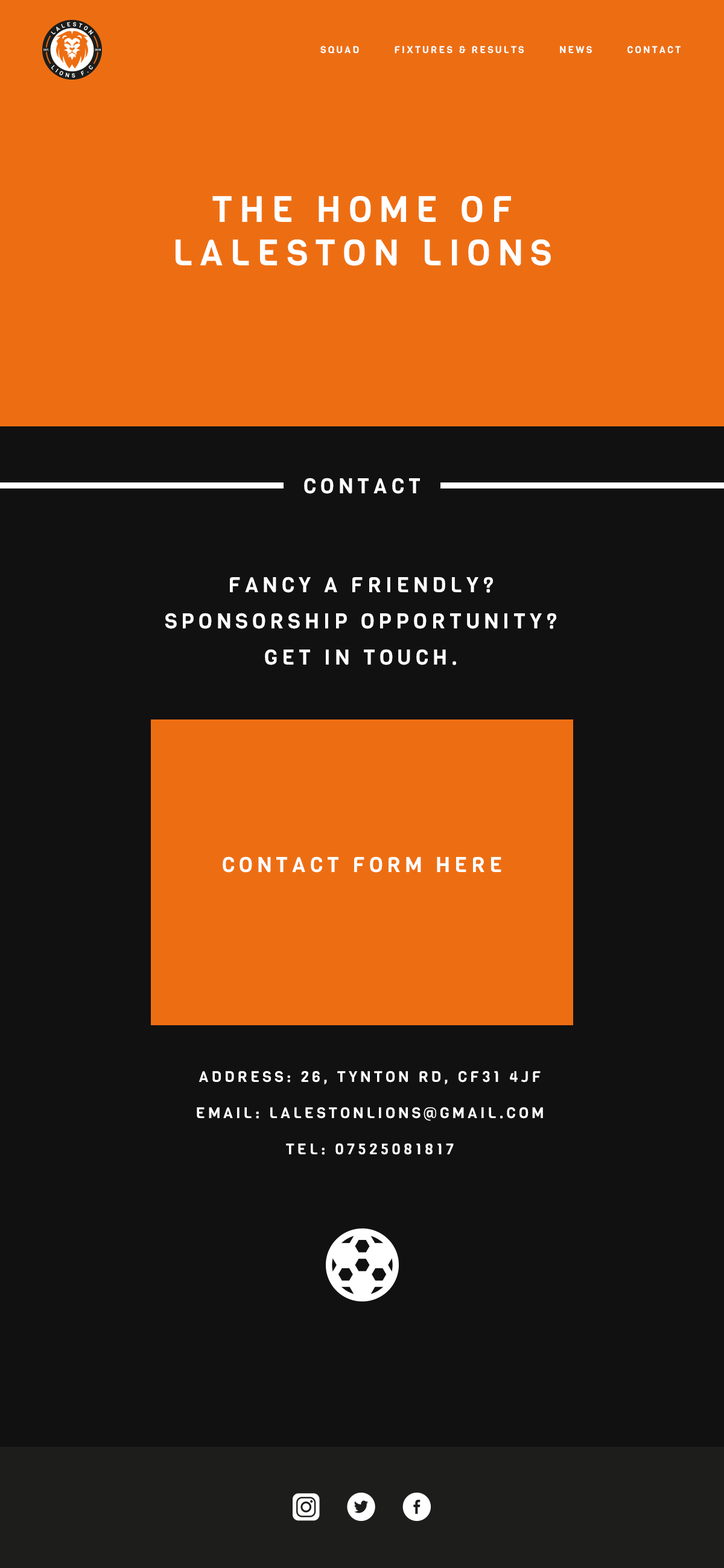
<style>
.page{position:relative;width:724px;height:1568px;background:#111111}
.page>*{position:absolute;margin:0}
.t1{font:9.6px "Viga-Regular";letter-spacing:0.2em;color:#ffffff;text-transform:uppercase}
.t2{font:36.2px "Viga-Regular";letter-spacing:0.2em;color:#ffffff}
.t3{font:21.1px "Viga-Regular";letter-spacing:0.2em;color:#ffffff}
.t4{font:21.1px/36.2px "Viga-Regular";letter-spacing:0.2em;color:#ffffff}
.t5{font:15.1px/36.2px "Viga-Regular";letter-spacing:0.2em;color:#ffffff}
</style>
<div class="page">
<p class="t1" style="left:320px;top:46px;width:360px;height:8px">SQUAD        FIXTURES &amp; RESULTS        NEWS        CONTACT</p>
<p class="t2" style="left:175px;top:196px;width:376px;height:70px;text-align:center">THE HOME OF <br>LALESTON LIONS</p>
<p class="t3" style="left:304px;top:478px;width:116px;height:16px">CONTACT</p>
<p class="t4" style="left:165px;top:577px;width:391px;height:88px;text-align:center">FANCY A FRIENDLY?<br>SPONSORSHIP OPPORTUNITY?<br>GET IN TOUCH.</p>
<p class="t3" style="left:223px;top:856px;width:278px;height:17px">CONTACT FORM HERE</p>
<p class="t5" style="left:197px;top:1071px;width:346px;height:84px;text-align:center">ADDRESS: 26, TYNTON RD, CF31 4JF<br>EMAIL: LALESTONLIONS@GMAIL.COM<br>TEL: 07525081817</p>
</div>
